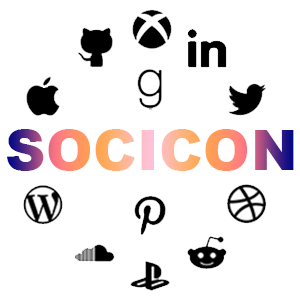
<style>
.page{position:relative;width:300px;height:300px;background:#ffffff}
.page>*{position:absolute;margin:0}
.t1{font:56px "Arial-Black";letter-spacing:0.01em;text-transform:uppercase}
</style>
<div class="page">
<p class="t1" style="left:7px;top:129px;width:287px;height:42px">Socicon</p>
</div>
